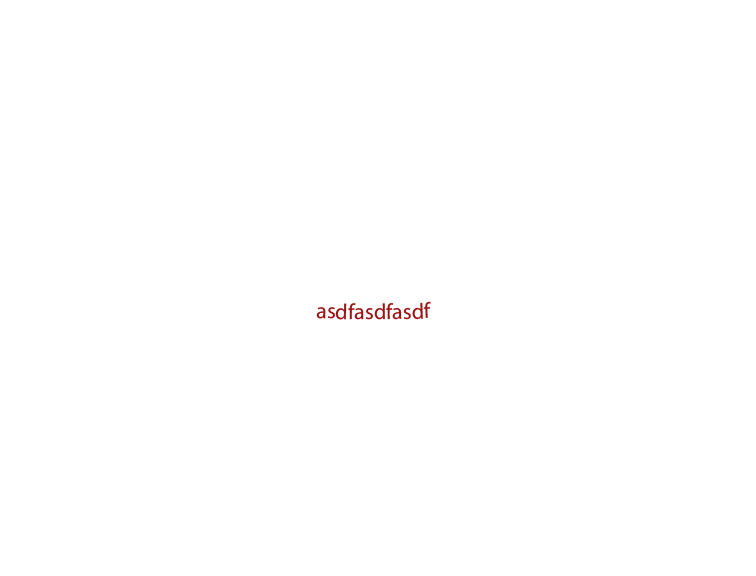
<style>
.page{position:relative;width:756px;height:576px;background:#ffffff}
.page>*{position:absolute;margin:0}
.t1{font:22px "MyriadPro-Regular";color:#9b1313}
</style>
<div class="page">
<p class="t1" style="left:316px;top:301px;width:115px;height:19px">asdfasdfasdf</p>
</div>
